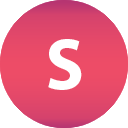
<style>
.page{position:relative;width:128px;height:128px;background:#ffffff}
.page>*{position:absolute;margin:0}
.t1{font:72px "MyriadPro-Bold";color:#ffffff}
</style>
<div class="page">
<p class="t1" style="left:48px;top:39px;width:34px;height:51px">S</p>
</div>
